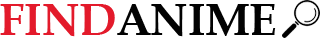
<style>
.page{position:relative;width:320px;height:38px;background:#ffffff}
.page>*{position:absolute;margin:0}
.t1{font:44.6px "BookAntiqua-Bold";color:#020202}
.t2{font:44.6px "BookAntiqua-Bold";color:#e31a2b}
</style>
<div class="page">
<p class="t1" style="left:0px;top:4px;width:276px;height:33px"><span class="t2">FIND</span>ANIME</p>
</div>
